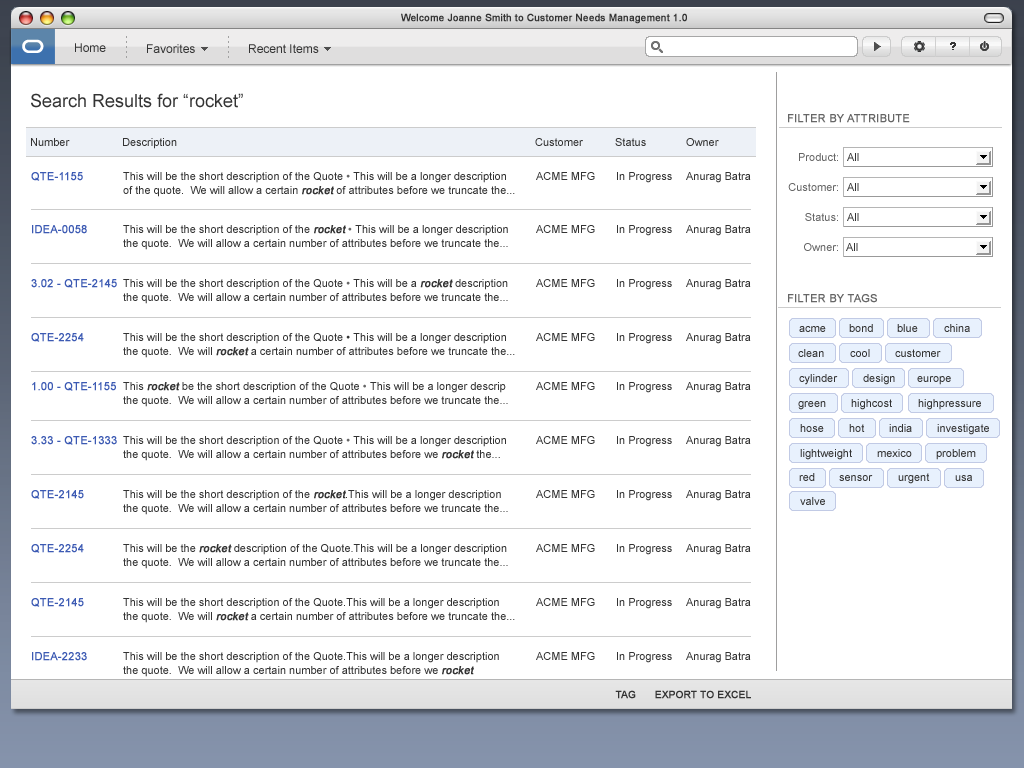
<style>
.page{position:relative;width:1024px;height:768px;background:#ffffff}
.page>*{position:absolute;margin:0}
.t1{font:10px "ArialMT";color:#333333;font-weight:bold}
.t2{font:12px "ArialMT";color:#333333}
.t3{font:18px "ArialMT";color:#333333}
.t4{font:11px "ArialMT";color:#666666;text-transform:uppercase;font-weight:bold}
.t5{font:11px "ArialMT";color:#333333}
.t6{font:11px "ArialMT";color:#666666}
.t7{font:11px "ArialMT";color:#3c5ab3;font-weight:bold}
.t8{font:11px/14px "ArialMT";color:#333333}
.t9{font:11px/20px "ArialMT";color:#333333}
.t10{font:11px/20px "ArialMT";color:#666666}
.t11{font:11px/14px "ArialMT";color:#333333;font-weight:bold;font-style:italic}
.t12{font:11px/20px "ArialMT";color:#333333;font-weight:bold;font-style:italic}
.t13{font:10px "ArialMT";color:#333333;text-transform:uppercase;font-weight:bold}
</style>
<div class="page">
<p class="t1" style="left:401px;top:13px;width:286px;height:11px">Welcome Joanne Smith to Customer Needs Management 1.0</p>
<p class="t2" style="left:75px;top:43px;width:31px;height:9px">Home</p>
<p class="t2" style="left:147px;top:44px;width:48px;height:9px">Favorites</p>
<p class="t2" style="left:249px;top:44px;width:70px;height:9px">Recent Items</p>
<p class="t3" style="left:31px;top:93px;width:212px;height:15px">Search Results for “rocket”</p>
<p class="t4" style="left:788px;top:114px;width:122px;height:9px">Filter by attribute</p>
<p class="t5" style="left:31px;top:138px;width:39px;height:8px">Number</p>
<p class="t5" style="left:123px;top:138px;width:54px;height:11px">Description</p>
<p class="t5" style="left:535px;top:138px;width:48px;height:8px">Customer</p>
<p class="t5" style="left:615px;top:138px;width:31px;height:8px">Status</p>
<p class="t5" style="left:686px;top:138px;width:33px;height:8px">Owner</p>
<p class="t6" style="left:799px;top:153px;width:39px;height:8px">Product:</p>
<p class="t5" style="left:847px;top:153px;width:12px;height:8px">All</p>
<p class="t7" style="left:31px;top:172px;width:52px;height:9px">QTE-1155</p>
<p class="t8" style="left:123px;top:172px;width:392px;height:25px"><span class="t9">This will be the short description of the Quote </span><span class="t10">• </span>This will be a longer description <br>of the quote.  We will allow a certain <span class="t11">rocket</span> of attributes before we truncate the...</p>
<p class="t5" style="left:536px;top:172px;width:59px;height:8px">ACME MFG</p>
<p class="t5" style="left:617px;top:172px;width:55px;height:11px">In Progress</p>
<p class="t5" style="left:686px;top:172px;width:65px;height:11px">Anurag Batra</p>
<p class="t6" style="left:788px;top:183px;width:50px;height:8px">Customer:</p>
<p class="t5" style="left:847px;top:183px;width:12px;height:8px">All</p>
<p class="t6" style="left:805px;top:213px;width:33px;height:8px">Status:</p>
<p class="t5" style="left:847px;top:213px;width:12px;height:8px">All</p>
<p class="t7" style="left:32px;top:225px;width:55px;height:9px">IDEA-0058</p>
<p class="t8" style="left:123px;top:225px;width:385px;height:25px"><span class="t9">This will be the short description of the </span><span class="t12">rocket</span><span class="t10"> • </span>This will be a longer description  <br>the quote.  We will allow a certain number of attributes before we truncate the...</p>
<p class="t5" style="left:536px;top:225px;width:59px;height:8px">ACME MFG</p>
<p class="t5" style="left:617px;top:225px;width:55px;height:11px">In Progress</p>
<p class="t5" style="left:686px;top:225px;width:65px;height:11px">Anurag Batra</p>
<p class="t6" style="left:804px;top:243px;width:34px;height:8px">Owner:</p>
<p class="t5" style="left:846px;top:243px;width:12px;height:8px">All</p>
<p class="t7" style="left:31px;top:279px;width:86px;height:9px">3.02 - QTE-2145</p>
<p class="t8" style="left:123px;top:279px;width:385px;height:25px"><span class="t9">This will be the short description of the Quote</span><span class="t10"> • </span>This will be a <span class="t11">rocket</span> description <br>the quote.  We will allow a certain number of attributes before we truncate the...</p>
<p class="t5" style="left:536px;top:279px;width:59px;height:8px">ACME MFG</p>
<p class="t5" style="left:617px;top:279px;width:55px;height:11px">In Progress</p>
<p class="t5" style="left:686px;top:279px;width:65px;height:11px">Anurag Batra</p>
<p class="t4" style="left:788px;top:294px;width:89px;height:9px">filter By tags</p>
<p class="t5" style="left:799px;top:326px;width:27px;height:6px">acme</p>
<p class="t5" style="left:849px;top:324px;width:24px;height:8px">bond</p>
<p class="t5" style="left:897px;top:324px;width:21px;height:8px">blue</p>
<p class="t5" style="left:944px;top:324px;width:26px;height:8px">china</p>
<p class="t7" style="left:31px;top:333px;width:53px;height:9px">QTE-2254</p>
<p class="t8" style="left:123px;top:333px;width:392px;height:25px"><span class="t9">This will be the short description of the Quote • </span>This will be a longer description<br>the quote.  We will <span class="t11">rocket</span> a certain number of attributes before we truncate the...</p>
<p class="t5" style="left:536px;top:333px;width:59px;height:8px">ACME MFG</p>
<p class="t5" style="left:617px;top:333px;width:55px;height:11px">In Progress</p>
<p class="t5" style="left:686px;top:333px;width:65px;height:11px">Anurag Batra</p>
<p class="t5" style="left:798px;top:349px;width:26px;height:8px">clean</p>
<p class="t5" style="left:850px;top:349px;width:20px;height:8px">cool</p>
<p class="t5" style="left:895px;top:349px;width:46px;height:8px">customer</p>
<p class="t5" style="left:799px;top:374px;width:39px;height:11px">cylinder</p>
<p class="t5" style="left:863px;top:374px;width:32px;height:11px">design</p>
<p class="t5" style="left:917px;top:376px;width:34px;height:9px">europe</p>
<p class="t7" style="left:32px;top:382px;width:84px;height:9px">1.00 - QTE-1155</p>
<p class="t8" style="left:123px;top:382px;width:385px;height:25px"><span class="t9">This </span><span class="t12">rocket</span><span class="t9"> be the short description of the Quote</span><span class="t10"> • </span>This will be a longer descrip <br>the quote.  We will allow a certain number of attributes before we truncate the...</p>
<p class="t5" style="left:536px;top:382px;width:59px;height:8px">ACME MFG</p>
<p class="t5" style="left:617px;top:382px;width:55px;height:11px">In Progress</p>
<p class="t5" style="left:686px;top:382px;width:65px;height:11px">Anurag Batra</p>
<p class="t5" style="left:798px;top:401px;width:28px;height:9px">green</p>
<p class="t5" style="left:851px;top:399px;width:41px;height:11px">highcost</p>
<p class="t5" style="left:918px;top:399px;width:63px;height:11px">highpressure</p>
<p class="t5" style="left:800px;top:424px;width:24px;height:8px">hose</p>
<p class="t5" style="left:849px;top:424px;width:16px;height:8px">hot</p>
<p class="t5" style="left:889px;top:424px;width:23px;height:8px">india</p>
<p class="t5" style="left:937px;top:424px;width:52px;height:11px">investigate</p>
<p class="t7" style="left:31px;top:436px;width:86px;height:9px">3.33 - QTE-1333</p>
<p class="t8" style="left:123px;top:436px;width:383px;height:25px"><span class="t9">This will be the short description of the Quote</span><span class="t10"> • </span>This will be a longer description  <br>the quote.  We will allow a certain number of attributes before we <span class="t11">rocket</span> the...</p>
<p class="t5" style="left:536px;top:436px;width:59px;height:8px">ACME MFG</p>
<p class="t5" style="left:617px;top:436px;width:55px;height:11px">In Progress</p>
<p class="t5" style="left:686px;top:436px;width:65px;height:11px">Anurag Batra</p>
<p class="t5" style="left:800px;top:449px;width:52px;height:11px">lightweight</p>
<p class="t5" style="left:877px;top:449px;width:35px;height:8px">mexico</p>
<p class="t5" style="left:936px;top:449px;width:40px;height:11px">problem</p>
<p class="t5" style="left:799px;top:473px;width:16px;height:8px">red</p>
<p class="t5" style="left:898px;top:473px;width:32px;height:11px">urgent</p>
<p class="t5" style="left:839px;top:475px;width:34px;height:6px">sensor</p>
<p class="t5" style="left:955px;top:475px;width:17px;height:6px">usa</p>
<p class="t7" style="left:31px;top:490px;width:53px;height:9px">QTE-2145</p>
<p class="t8" style="left:123px;top:490px;width:385px;height:25px"><span class="t9">This will be the short description of the </span><span class="t12">rocket</span><span class="t9">.</span>This will be a longer description <br>the quote.  We will allow a certain number of attributes before we truncate the...</p>
<p class="t5" style="left:536px;top:490px;width:59px;height:8px">ACME MFG</p>
<p class="t5" style="left:617px;top:490px;width:55px;height:11px">In Progress</p>
<p class="t5" style="left:686px;top:490px;width:65px;height:11px">Anurag Batra</p>
<p class="t5" style="left:800px;top:497px;width:25px;height:8px">valve</p>
<p class="t7" style="left:31px;top:544px;width:53px;height:9px">QTE-2254</p>
<p class="t8" style="left:123px;top:544px;width:385px;height:25px"><span class="t9">This will be the </span><span class="t12">rocket</span><span class="t9"> description of the Quote.</span>This will be a longer description <br>the quote.  We will allow a certain number of attributes before we truncate the...</p>
<p class="t5" style="left:536px;top:544px;width:59px;height:8px">ACME MFG</p>
<p class="t5" style="left:617px;top:544px;width:55px;height:11px">In Progress</p>
<p class="t5" style="left:686px;top:544px;width:65px;height:11px">Anurag Batra</p>
<p class="t7" style="left:31px;top:598px;width:53px;height:9px">QTE-2145</p>
<p class="t8" style="left:123px;top:598px;width:392px;height:25px"><span class="t9">This will be the short description of the Quote.</span>This will be a longer description <br>the quote.  We will <span class="t11">rocket</span> a certain number of attributes before we truncate the...</p>
<p class="t5" style="left:536px;top:598px;width:59px;height:8px">ACME MFG</p>
<p class="t5" style="left:617px;top:598px;width:55px;height:11px">In Progress</p>
<p class="t5" style="left:686px;top:598px;width:65px;height:11px">Anurag Batra</p>
<p class="t7" style="left:32px;top:652px;width:55px;height:9px">IDEA-2233</p>
<p class="t8" style="left:123px;top:652px;width:376px;height:25px"><span class="t9">This will be the short description of the Quote.</span>This will be a longer description <br>the quote.  We will allow a certain number of attributes before we <span class="t11">rocket</span></p>
<p class="t5" style="left:536px;top:652px;width:59px;height:8px">ACME MFG</p>
<p class="t5" style="left:617px;top:652px;width:55px;height:11px">In Progress</p>
<p class="t5" style="left:686px;top:652px;width:65px;height:11px">Anurag Batra</p>
<p class="t13" style="left:615px;top:690px;width:21px;height:9px">tag</p>
<p class="t13" style="left:655px;top:690px;width:96px;height:9px">Export to excel</p>
</div>
